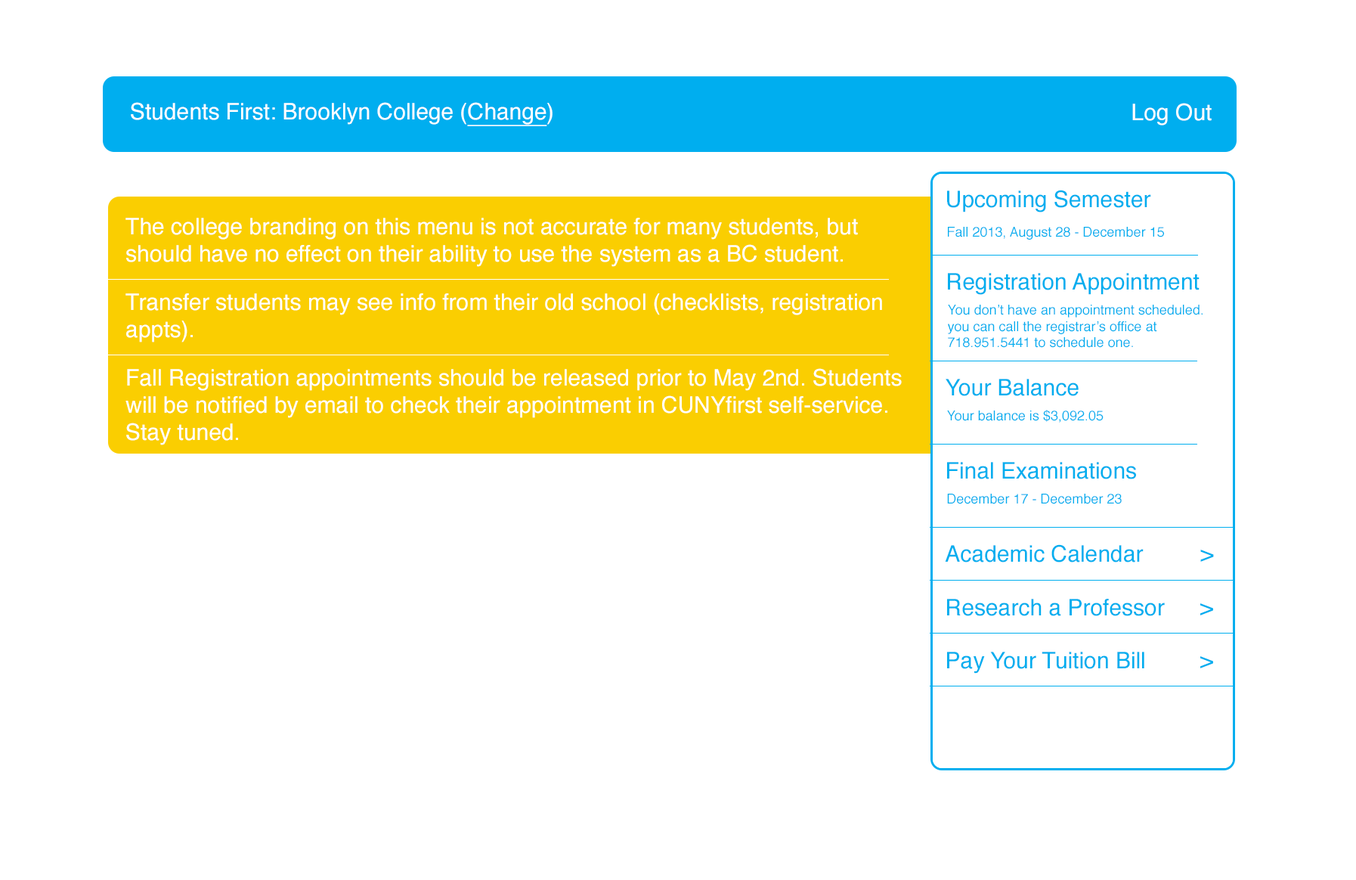
<style>
.page{position:relative;width:1356px;height:880px;background:#ffffff}
.page>*{position:absolute;margin:0}
.t1{font:22.7px "Helvetica";color:#ffffff}
.t2{font:22.7px "Helvetica";color:#ffffff;text-decoration:underline}
.t3{font:22.7px "Helvetica";color:#00aeef}
.t4{font:13.6px "Helvetica";color:#00aeef}
</style>
<div class="page">
<p class="t1" style="left:131px;top:102px;width:421px;height:24px">Students First: Brooklyn College (<span class="t2">Change</span>)</p>
<p class="t1" style="left:1132px;top:103px;width:79px;height:22px">Log Out</p>
<p class="t3" style="left:947px;top:190px;width:204px;height:22px">Upcoming Semester</p>
<p class="t1" style="left:125px;top:218px;width:733px;height:49px">The college branding on this menu is not accurate for many students, but <br>should have no effect on their ability to use the system as a BC student.</p>
<p class="t4" style="left:948px;top:227px;width:216px;height:13px">Fall 2013, August 28 - December 15</p>
<p class="t3" style="left:948px;top:273px;width:251px;height:22px">Registration Appointment</p>
<p class="t1" style="left:125px;top:293px;width:757px;height:49px">Transfer students may see info from their old school (checklists, registration <br>appts).</p>
<p class="t4" style="left:948px;top:305px;width:254px;height:43px">You don’t have an appointment scheduled.<br>you can call the registrar’s office at<br>718.951.5441 to schedule one.</p>
<p class="t1" style="left:125px;top:368px;width:777px;height:77px">Fall Registration appointments should be released prior to May 2nd. Students <br>will be notified by email to check their appointment in CUNYfirst self-service.  <br>Stay tuned.</p>
<p class="t3" style="left:945px;top:379px;width:133px;height:17px">Your Balance</p>
<p class="t4" style="left:947px;top:410px;width:156px;height:12px">Your balance is $3,092.05</p>
<p class="t3" style="left:947px;top:462px;width:189px;height:17px">Final Examinations</p>
<p class="t4" style="left:947px;top:493px;width:174px;height:11px">December 17 - December 23</p>
<p class="t3" style="left:945px;top:544px;width:198px;height:18px">Academic Calendar</p>
<p class="t3" style="left:1200px;top:549px;width:14px;height:12px">&gt;</p>
<p class="t3" style="left:947px;top:598px;width:217px;height:18px">Research a Professor</p>
<p class="t3" style="left:1200px;top:603px;width:13px;height:12px">&gt;</p>
<p class="t3" style="left:947px;top:651px;width:197px;height:22px">Pay Your Tuition Bill</p>
<p class="t3" style="left:1200px;top:656px;width:13px;height:12px">&gt;</p>
</div>
